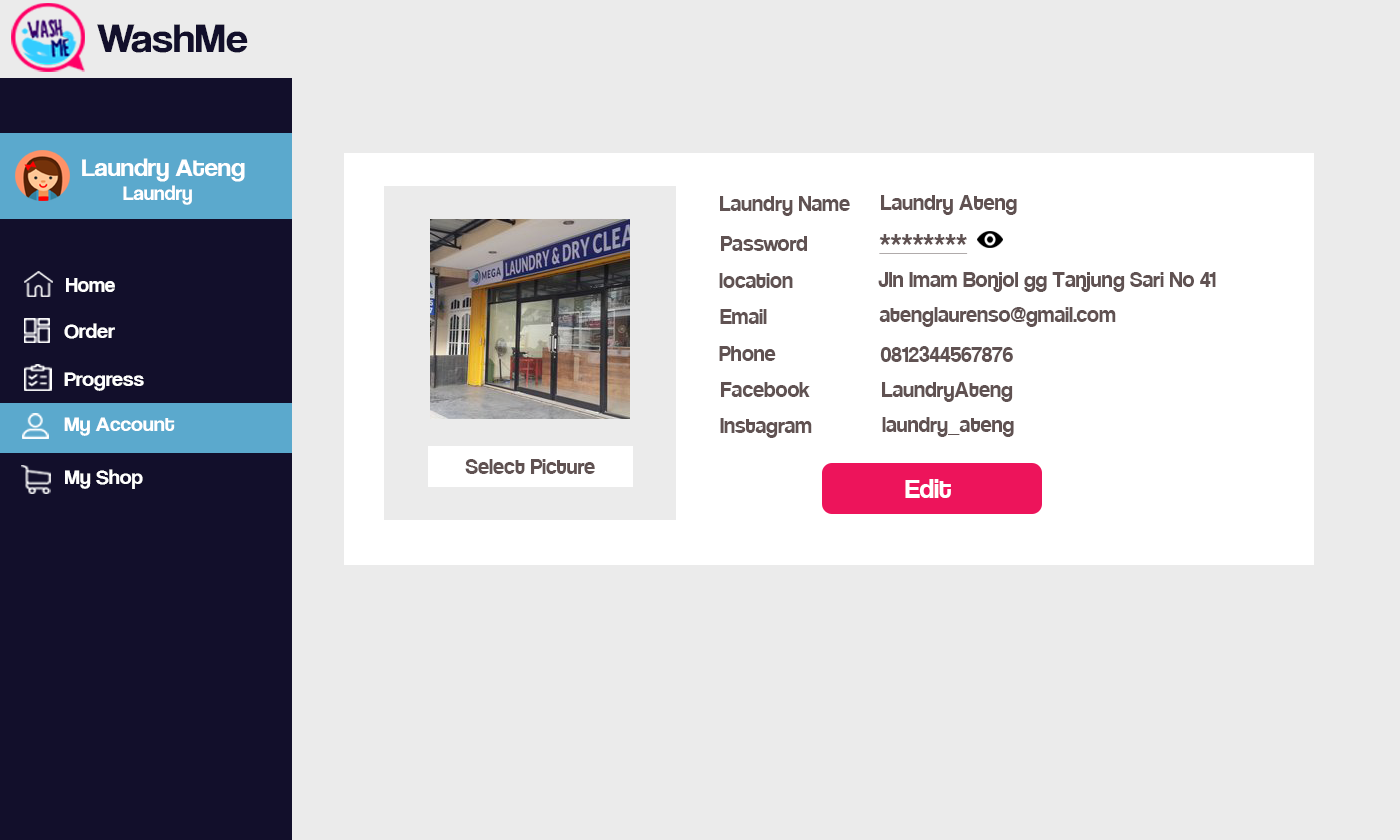
<style>
.page{position:relative;width:1400px;height:840px;background:#ebebeb}
.page>*{position:absolute;margin:0}
.t1{font:42.1px "CoolveticaRg-Regular";color:#120f2b;scale:1.05 1}
.t2{font:25.2px "CoolveticaRg-Regular";color:#ffffff;scale:1.05 1}
.t3{font:20px "CoolveticaRg-Regular";color:#ffffff;scale:1.05 1}
.t4{font:24px "Coolvetica-Regular";color:#605252}
.t5{font:24px "Coolvetica-Regular";color:#605252;text-decoration:underline}
.t6{font:21px "CoolveticaRg-Regular";color:#ffffff}
.t7{font:21px "CoolveticaRg-Regular";color:#ffffff;scale:1.05 1}
.t8{font:30px "Coolvetica-Regular";color:#ffffff}
</style>
<div class="page">
<p class="t1" style="left:97px;top:24px;width:151px;height:29px">WashMe</p>
<p class="t2" style="left:82px;top:158px;width:163px;height:47px">Laundry Ateng<br><span class="t3">        Laundry</span></p>
<p class="t4" style="left:720px;top:196px;width:130px;height:20px">Laundry Name</p>
<p class="t4" style="left:881px;top:195px;width:136px;height:20px">Laundry Ateng</p>
<p class="t4" style="left:721px;top:236px;width:86px;height:15px">Password</p>
<p class="t5" style="left:879px;top:234px;width:89px;height:20px">********</p>
<p class="t6" style="left:66px;top:278px;width:49px;height:14px">Home</p>
<p class="t4" style="left:719px;top:273px;width:74px;height:15px">location</p>
<p class="t4" style="left:878px;top:272px;width:338px;height:20px">Jln Imam Bonjol gg Tanjung Sari No 41</p>
<p class="t4" style="left:720px;top:309px;width:47px;height:15px">Email</p>
<p class="t4" style="left:879px;top:307px;width:237px;height:20px">atenglaurenso@gmail.com</p>
<p class="t7" style="left:64px;top:323px;width:51px;height:16px">Order</p>
<p class="t4" style="left:719px;top:346px;width:57px;height:15px">Phone</p>
<p class="t4" style="left:880px;top:346px;width:133px;height:16px">0812344567876</p>
<p class="t7" style="left:64px;top:372px;width:80px;height:19px">Progress</p>
<p class="t4" style="left:721px;top:382px;width:89px;height:15px">Facebook</p>
<p class="t4" style="left:882px;top:382px;width:131px;height:20px">LaundryAteng</p>
<p class="t7" style="left:64px;top:417px;width:111px;height:19px">My Account</p>
<p class="t4" style="left:720px;top:418px;width:92px;height:20px">Instagram</p>
<p class="t4" style="left:882px;top:417px;width:132px;height:20px">laundry_ateng</p>
<p class="t4" style="left:465px;top:459px;width:130px;height:15px">Select Picture</p>
<p class="t7" style="left:65px;top:469px;width:78px;height:20px">My Shop</p>
<p class="t8" style="left:905px;top:479px;width:46px;height:19px">Edit</p>
</div>
